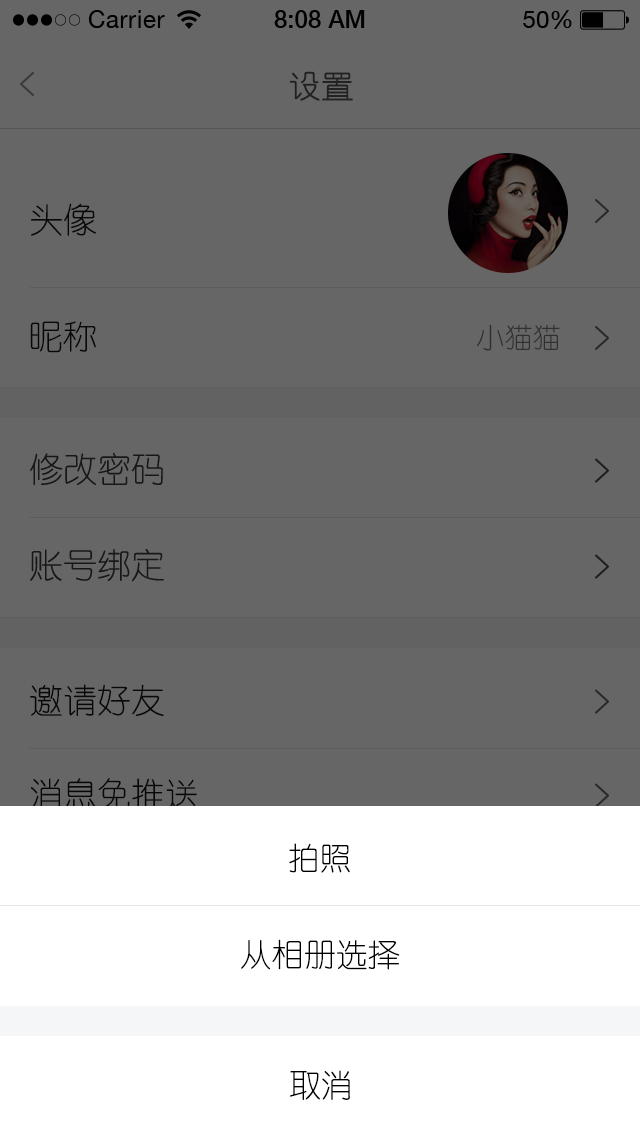
<style>
.page{position:relative;width:640px;height:1136px;background:#666666}
.page>*{position:absolute;margin:0}
.t1{font:32px "YouYuan";color:#222222;text-transform:uppercase;font-weight:bold}
.t2{font:34px "YouYuan";color:#121414}
.t3{font:28px "YouYuan";color:#303030}
.t4{font:34.1px "YouYuan";color:#121414}
.t5{font:32px "YouYuan";color:#000000;text-transform:uppercase}
</style>
<div class="page">
<p class="t1" style="left:289px;top:71px;width:64px;height:30px">设置</p>
<p class="t2" style="left:30px;top:203px;width:66px;height:33px">头像</p>
<p class="t2" style="left:30px;top:321px;width:66px;height:32px">昵称</p>
<p class="t3" style="left:477px;top:324px;width:83px;height:27px">小猫猫</p>
<p class="t4" style="left:30px;top:452px;width:133px;height:34px">修改密码</p>
<p class="t4" style="left:30px;top:549px;width:134px;height:33px">账号绑定</p>
<p class="t4" style="left:30px;top:684px;width:134px;height:33px">邀请好友</p>
<p class="t4" style="left:30px;top:777px;width:168px;height:33px">消息免推送</p>
<p class="t5" style="left:289px;top:843px;width:61px;height:30px">拍照</p>
<p class="t5" style="left:241px;top:939px;width:159px;height:31px">从相册选择</p>
<p class="t5" style="left:289px;top:1070px;width:61px;height:30px">取消</p>
</div>
